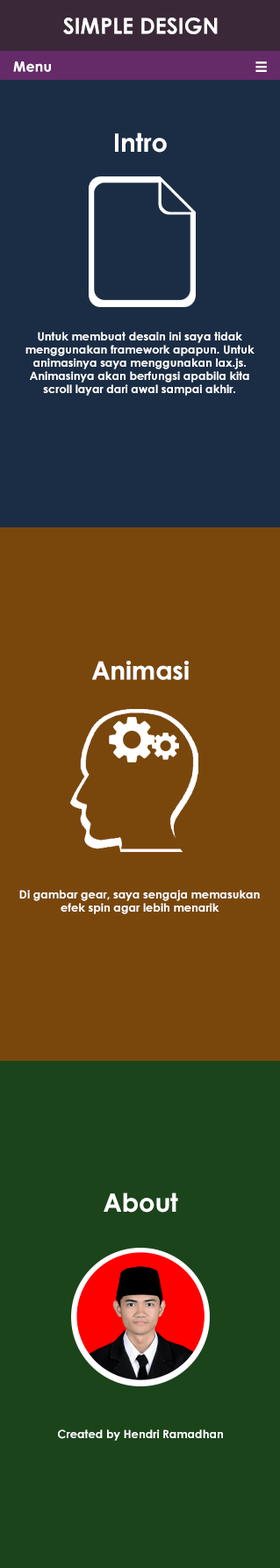
<style>
.page{position:relative;width:280px;height:1568px;background:#79470c}
.page>*{position:absolute;margin:0}
.t1{font:21.9px "CenturyGothic-Bold";color:#ffffff}
.t2{font:14px "CenturyGothic-Bold";color:#ffffff}
.t3{font:14.9px "CenturyGothic-Bold";color:#ffffff}
.t4{font:25.4px "CenturyGothic-Bold";color:#ffffff}
.t5{font:11.4px/13.2px "CenturyGothic-Bold";color:#ffffff}
.t6{font:11.4px "CenturyGothic-Bold";color:#ffffff}
</style>
<div class="page">
<p class="t1" style="left:63px;top:18px;width:155px;height:16px">SIMPLE DESIGN</p>
<p class="t2" style="left:13px;top:61px;width:38px;height:11px">Menu</p>
<p class="t3" style="left:255px;top:61px;width:12px;height:11px;rotate:90deg">III</p>
<p class="t4" style="left:115px;top:132px;width:52px;height:21px">Intro</p>
<p class="t5" style="left:25px;top:332px;width:229px;height:64px;text-align:center">Untuk membuat desain ini saya tidak<br>menggunakan framework apapun. Untuk<br>animasinya saya menggunakan lax.js.<br>Animasinya akan berfungsi apabila kita<br>scroll layar dari awal sampai akhir.</p>
<p class="t4" style="left:92px;top:661px;width:97px;height:19px">Animasi</p>
<p class="t5" style="left:19px;top:890px;width:241px;height:24px;text-align:center">Di gambar gear, saya sengaja memasukan<br>efek spin agar lebih menarik</p>
<p class="t4" style="left:104px;top:1192px;width:74px;height:21px">About</p>
<p class="t6" style="left:58px;top:1429px;width:165px;height:12px">Created by Hendri Ramadhan</p>
</div>
